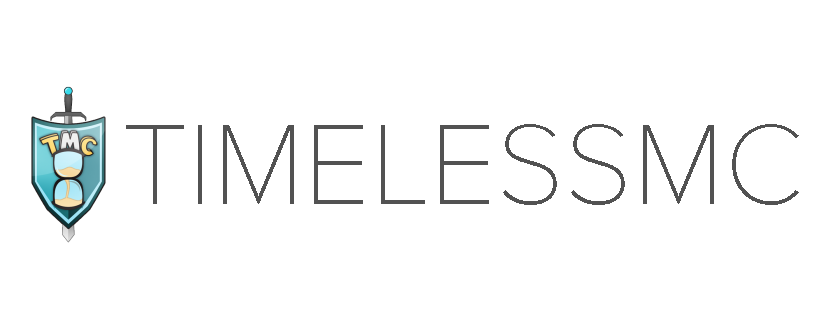
<style>
.page{position:relative;width:821px;height:322px;background:#ffffff}
.page>*{position:absolute;margin:0}
.t1{font:118.7px "ProximaNovaT-Thin";color:#525252}
</style>
<div class="page">
<p class="t1" style="left:126px;top:124px;width:673px;height:81px">TIMELESSMC</p>
</div>
